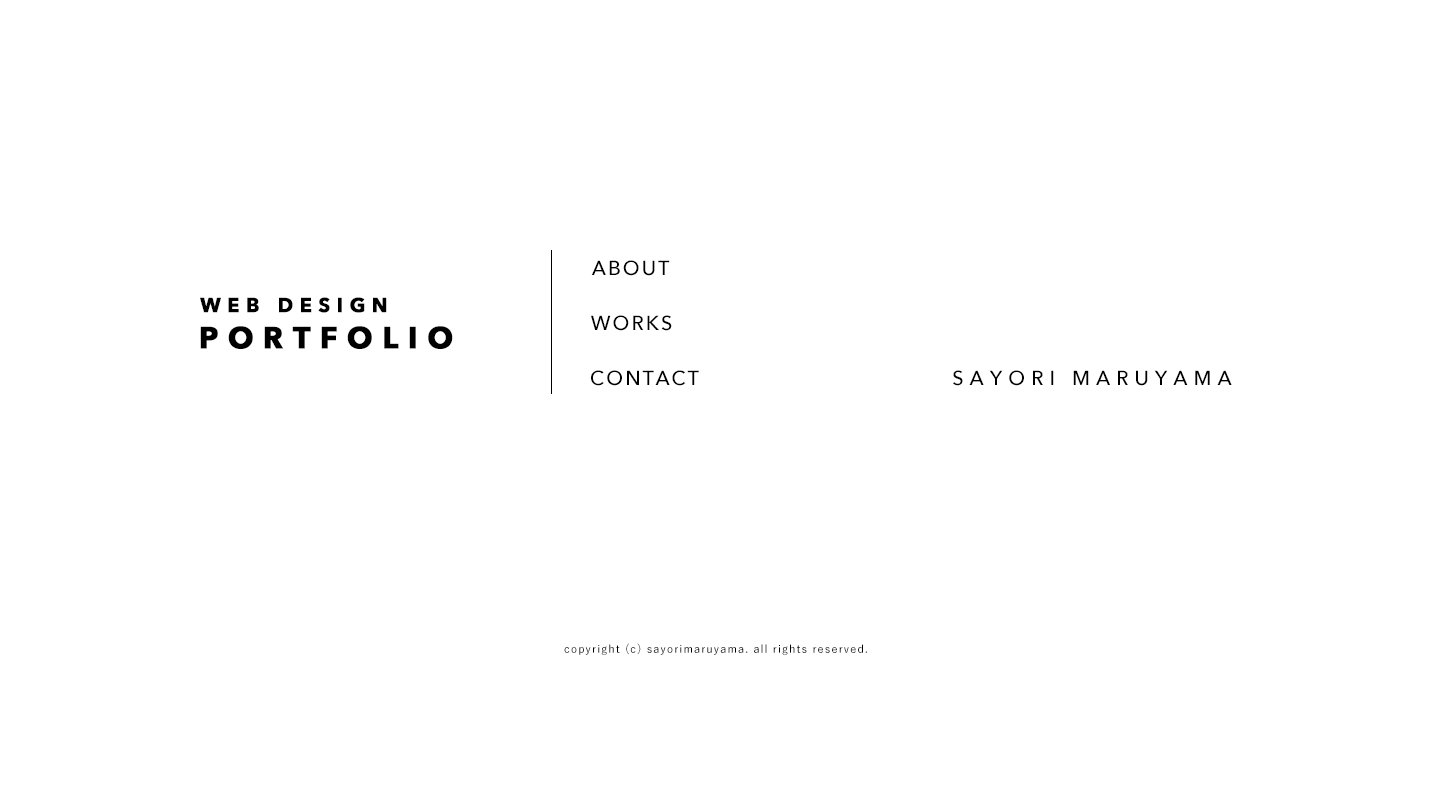
<style>
.page{position:relative;width:1432px;height:800px;background:#ffffff}
.page>*{position:absolute;margin:0}
.t1{font:20px "AvenirNext-Medium";letter-spacing:0.1em;color:#000000}
.t2{font:20px/36px "AvenirNext-Bold";letter-spacing:0.3em;color:#000000;font-weight:bold}
.t3{font:30px/36px "AvenirNext-Bold";letter-spacing:0.3em;color:#000000;font-weight:bold}
.t4{font:20px "AvenirNext-Medium";letter-spacing:0.3em;color:#000000}
.t5{font:11px "YuGo-Medium";letter-spacing:0.1em;color:#000000}
</style>
<div class="page">
<p class="t1" style="left:591px;top:260px;width:79px;height:16px">ABOUT</p>
<p class="t2" style="left:200px;top:297px;width:253px;height:52px">WEB DESIGN <br><span class="t3">PORTFOLIO</span></p>
<p class="t1" style="left:591px;top:315px;width:81px;height:16px">WORKS</p>
<p class="t1" style="left:591px;top:370px;width:108px;height:16px">CONTACT</p>
<p class="t4" style="left:953px;top:370px;width:279px;height:16px">SAYORI MARUYAMA</p>
<p class="t5" style="left:564px;top:643px;width:303px;height:12px">copyright (c) sayorimaruyama. all rights reserved.</p>
</div>
